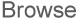
<style>
.page{position:relative;width:77px;height:24px;background:#ffffff}
.page>*{position:absolute;margin:0}
.t1{font:22.7px "ArialMT";color:#5c5c5c}
</style>
<div class="page">
<p class="t1" style="left:2px;top:1px;width:74px;height:17px">Browse</p>
</div>
